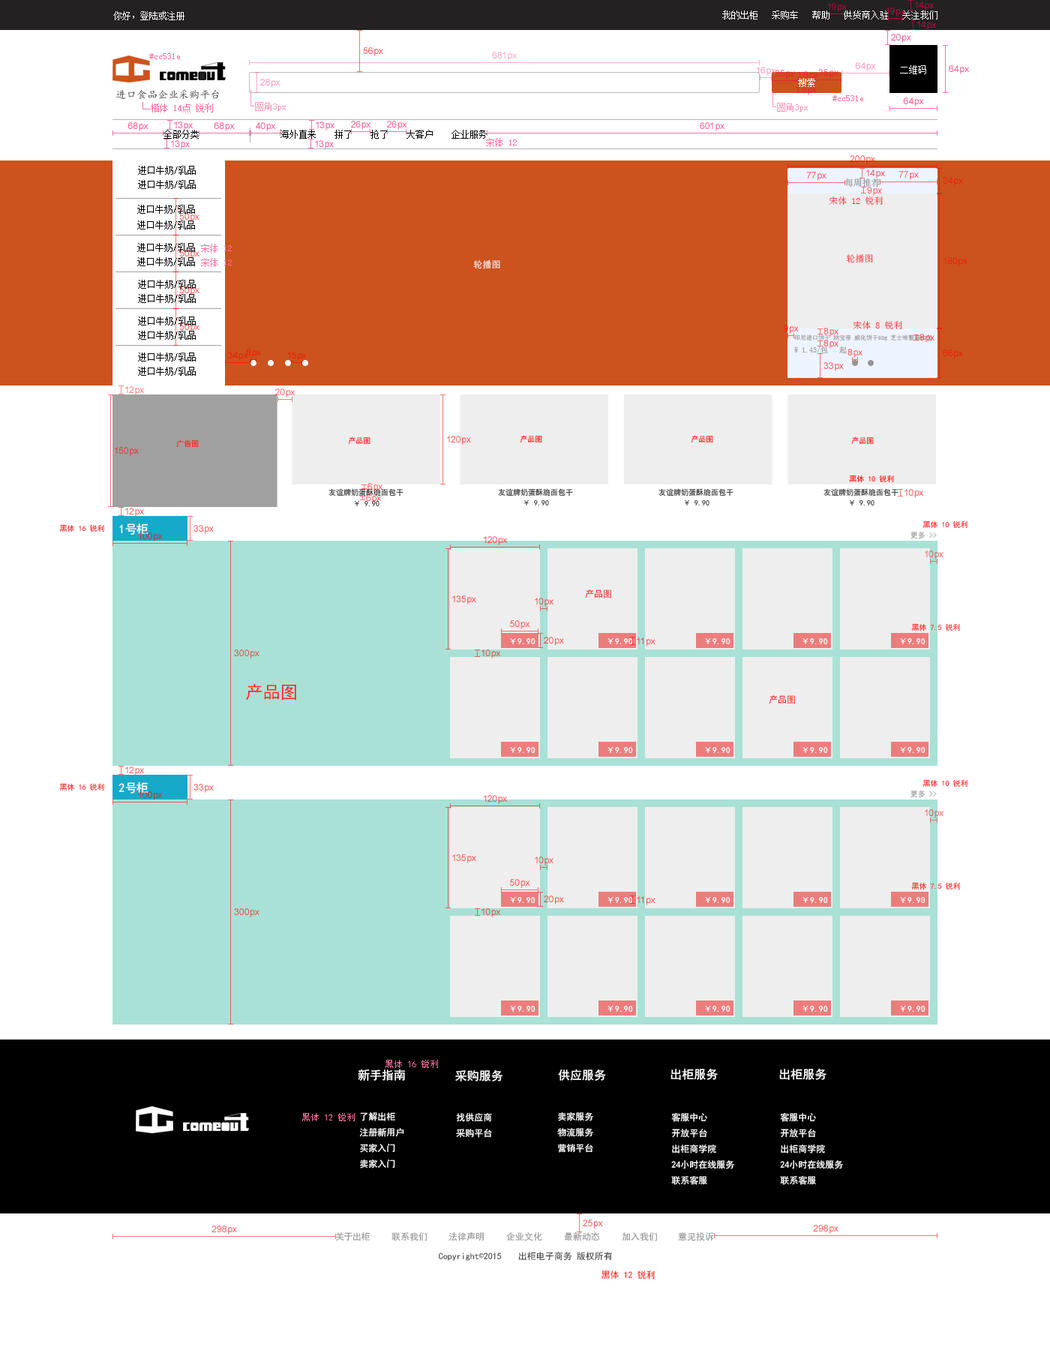
<style>
.page{position:relative;width:1050px;height:1350px;background:#ffffff}
.page>*{position:absolute;margin:0}
.t1{font:9px "SimSun";color:#ffffff}
.t2{font:9px "SimSun";color:#fc6f9a}
.t3{font:10.5px "¿¬Ìå";color:#464343}
.t4{font:9px "SimSun";color:#000000}
.t5{font:9px "SimSun";color:#959595}
.t6{font:9px "SimSun";color:#f13341}
.t7{font:9px "SimSun"}
.t8{font:9px "SimSun";color:#ffeeef}
.t9{font:6px "SimSun";color:#a0a0a0}
.t10{font:7.5px "SimSun";color:#a0a0a0}
.t11{font:7.5px "SimHei"}
.t12{font:7.5px "SimHei";color:#fe1d1d}
.t13{font:7.5px "SimHei";color:#363636}
.t14{font:7.5px "SimHei";color:#ff3535}
.t15{font:12px "SimHei";color:#fefefe}
.t16{font:7.5px "SimHei";color:#a0a0a0}
.t17{font:9px "SimHei";color:#ff2222}
.t18{font:8.2px "SimHei";color:#fefefe}
.t19{font:17.4px "SimHei";color:#ff2222}
.t20{font:9px "SimHei";color:#fc6f9a}
.t21{font:12px "SimHei";color:#ffffff}
.t22{font:9px "SimHei";color:#ffffff}
.t23{font:9px "SimHei";color:#959595}
.t24{font:9px "SimHei";color:#434343}
.t25{font:9px "SimSun";color:#434343}
</style>
<div class="page">
<p class="t1" style="left:113px;top:11px;width:71px;height:9px">你好，登陆或注册</p>
<p class="t1" style="left:722px;top:10px;width:216px;height:10px">我的出柜   采购车   帮助   供货商入驻   关注我们</p>
<p class="t2" style="left:149px;top:53px;width:31px;height:6px">#cc531e</p>
<p class="t1" style="left:900px;top:65px;width:26px;height:9px">二维码</p>
<p class="t1" style="left:798px;top:78px;width:17px;height:9px">搜索</p>
<p class="t3" style="left:116px;top:89px;width:103px;height:11px">进口食品企业采购平台</p>
<p class="t2" style="left:832px;top:95px;width:31px;height:6px">#cc531e</p>
<p class="t4" style="left:164px;top:130px;width:35px;height:9px">全部分类</p>
<p class="t4" style="left:280px;top:130px;width:207px;height:9px">海外直来    拼了    抢了    大客户    企业服务</p>
<p class="t2" style="left:486px;top:138px;width:31px;height:9px">宋体 12</p>
<p class="t4" style="left:138px;top:166px;width:58px;height:9px">进口牛奶/乳品</p>
<p class="t4" style="left:138px;top:180px;width:58px;height:9px">进口牛奶/乳品</p>
<p class="t5" style="left:844px;top:178px;width:36px;height:10px">每周推荐</p>
<p class="t6" style="left:829px;top:196px;width:54px;height:10px">宋体 12 锐利</p>
<p class="t4" style="left:137px;top:205px;width:58px;height:9px">进口牛奶/乳品</p>
<p class="t4" style="left:137px;top:220px;width:58px;height:10px">进口牛奶/乳品</p>
<p class="t4" style="left:137px;top:243px;width:58px;height:9px">进口牛奶/乳品</p>
<p class="t2" style="left:201px;top:244px;width:31px;height:9px">宋体 12</p>
<p class="t4" style="left:137px;top:257px;width:58px;height:9px">进口牛奶/乳品</p>
<p class="t7" style="left:846px;top:254px;width:27px;height:9px">轮播图</p>
<p class="t2" style="left:201px;top:258px;width:31px;height:9px">宋体 12</p>
<p class="t8" style="left:473px;top:260px;width:27px;height:9px">轮播图</p>
<p class="t4" style="left:138px;top:280px;width:58px;height:9px">进口牛奶/乳品</p>
<p class="t4" style="left:138px;top:294px;width:58px;height:9px">进口牛奶/乳品</p>
<p class="t4" style="left:138px;top:316px;width:58px;height:10px">进口牛奶/乳品</p>
<p class="t6" style="left:853px;top:321px;width:49px;height:9px">宋体 8 锐利</p>
<p class="t4" style="left:138px;top:331px;width:58px;height:9px">进口牛奶/乳品</p>
<p class="t9" style="left:794px;top:334px;width:138px;height:6px">印尼进口饼干 纳宝帝 威化饼干58g 芝士味整箱60包</p>
<p class="t4" style="left:138px;top:352px;width:58px;height:10px">进口牛奶/乳品</p>
<p class="t10" style="left:794px;top:346px;width:53px;height:8px">¥ 1.45/包   起</p>
<p class="t4" style="left:138px;top:367px;width:58px;height:9px">进口牛奶/乳品</p>
<p class="t11" style="left:348px;top:436px;width:22px;height:9px">产品图</p>
<p class="t11" style="left:520px;top:435px;width:22px;height:8px">产品图</p>
<p class="t11" style="left:691px;top:435px;width:22px;height:8px">产品图</p>
<p class="t11" style="left:851px;top:436px;width:23px;height:9px">产品图</p>
<p class="t12" style="left:176px;top:440px;width:23px;height:8px">广告图</p>
<p class="t12" style="left:849px;top:475px;width:45px;height:8px">黑体 10 锐利</p>
<p class="t13" style="left:328px;top:488px;width:76px;height:8px">友谊牌奶蛋酥脆面包干</p>
<p class="t13" style="left:498px;top:488px;width:75px;height:8px">友谊牌奶蛋酥脆面包干</p>
<p class="t13" style="left:658px;top:488px;width:76px;height:8px">友谊牌奶蛋酥脆面包干</p>
<p class="t13" style="left:824px;top:488px;width:74px;height:8px">友谊牌奶蛋酥脆面包干</p>
<p class="t11" style="left:355px;top:500px;width:25px;height:7px">￥ 9.90</p>
<p class="t11" style="left:524px;top:500px;width:25px;height:6px">￥ 9.90</p>
<p class="t11" style="left:685px;top:500px;width:25px;height:6px">￥ 9.90</p>
<p class="t11" style="left:850px;top:500px;width:24px;height:6px">￥ 9.90</p>
<p class="t14" style="left:922px;top:520px;width:46px;height:9px">黑体 10 锐利</p>
<p class="t14" style="left:59px;top:524px;width:45px;height:8px">黑体 16 锐利</p>
<p class="t15" style="left:119px;top:523px;width:29px;height:12px">1号柜</p>
<p class="t16" style="left:910px;top:532px;width:27px;height:7px">更多 &gt;&gt;</p>
<p class="t17" style="left:585px;top:590px;width:26px;height:8px">产品图</p>
<p class="t14" style="left:911px;top:623px;width:49px;height:9px">黑体 7.5 锐利</p>
<p class="t18" style="left:510px;top:638px;width:26px;height:6px">￥9.90</p>
<p class="t18" style="left:608px;top:638px;width:25px;height:6px">￥9.90</p>
<p class="t18" style="left:705px;top:638px;width:25px;height:6px">￥9.90</p>
<p class="t18" style="left:802px;top:638px;width:26px;height:6px">￥9.90</p>
<p class="t18" style="left:900px;top:638px;width:26px;height:6px">￥9.90</p>
<p class="t19" style="left:246px;top:683px;width:50px;height:17px">产品图</p>
<p class="t17" style="left:769px;top:695px;width:26px;height:9px">产品图</p>
<p class="t18" style="left:510px;top:747px;width:26px;height:6px">￥9.90</p>
<p class="t18" style="left:608px;top:747px;width:25px;height:6px">￥9.90</p>
<p class="t18" style="left:705px;top:747px;width:25px;height:6px">￥9.90</p>
<p class="t18" style="left:802px;top:747px;width:26px;height:6px">￥9.90</p>
<p class="t18" style="left:900px;top:747px;width:26px;height:6px">￥9.90</p>
<p class="t14" style="left:59px;top:783px;width:45px;height:8px">黑体 16 锐利</p>
<p class="t15" style="left:118px;top:782px;width:30px;height:12px">2号柜</p>
<p class="t14" style="left:922px;top:779px;width:46px;height:9px">黑体 10 锐利</p>
<p class="t16" style="left:910px;top:790px;width:27px;height:8px">更多 &gt;&gt;</p>
<p class="t14" style="left:911px;top:882px;width:49px;height:8px">黑体 7.5 锐利</p>
<p class="t18" style="left:510px;top:897px;width:26px;height:6px">￥9.90</p>
<p class="t18" style="left:608px;top:897px;width:25px;height:6px">￥9.90</p>
<p class="t18" style="left:705px;top:897px;width:25px;height:6px">￥9.90</p>
<p class="t18" style="left:802px;top:897px;width:26px;height:6px">￥9.90</p>
<p class="t18" style="left:900px;top:897px;width:26px;height:6px">￥9.90</p>
<p class="t18" style="left:510px;top:1006px;width:26px;height:6px">￥9.90</p>
<p class="t18" style="left:608px;top:1006px;width:25px;height:6px">￥9.90</p>
<p class="t18" style="left:705px;top:1006px;width:25px;height:6px">￥9.90</p>
<p class="t18" style="left:802px;top:1006px;width:26px;height:6px">￥9.90</p>
<p class="t18" style="left:900px;top:1006px;width:26px;height:6px">￥9.90</p>
<p class="t20" style="left:386px;top:1060px;width:52px;height:8px">黑体 16 锐利</p>
<p class="t21" style="left:358px;top:1069px;width:48px;height:12px">新手指南</p>
<p class="t21" style="left:455px;top:1070px;width:47px;height:12px">采购服务</p>
<p class="t21" style="left:558px;top:1069px;width:48px;height:12px">供应服务</p>
<p class="t21" style="left:670px;top:1068px;width:48px;height:12px">出柜服务</p>
<p class="t21" style="left:779px;top:1068px;width:47px;height:12px">出柜服务</p>
<p class="t20" style="left:302px;top:1113px;width:53px;height:8px">黑体 12 锐利</p>
<p class="t22" style="left:359px;top:1112px;width:45px;height:56px">了解出柜<br>注册新用户<br>买家入门<br>卖家入门</p>
<p class="t22" style="left:456px;top:1113px;width:36px;height:25px">找供应商<br>采购平台</p>
<p class="t22" style="left:557px;top:1112px;width:36px;height:41px">卖家服务<br>物流服务<br>营销平台</p>
<p class="t22" style="left:671px;top:1113px;width:63px;height:72px">客服中心<br>开放平台<br>出柜商学院<br>24小时在线服务<br>联系客服</p>
<p class="t22" style="left:780px;top:1113px;width:63px;height:72px">客服中心<br>开放平台<br>出柜商学院<br>24小时在线服务<br>联系客服</p>
<p class="t23" style="left:335px;top:1232px;width:35px;height:9px">关于出柜</p>
<p class="t23" style="left:392px;top:1232px;width:35px;height:9px">联系我们</p>
<p class="t23" style="left:448px;top:1232px;width:36px;height:9px">法律声明</p>
<p class="t23" style="left:506px;top:1232px;width:36px;height:9px">企业文化</p>
<p class="t23" style="left:564px;top:1232px;width:36px;height:9px">最新动态</p>
<p class="t23" style="left:622px;top:1232px;width:35px;height:9px">加入我们</p>
<p class="t23" style="left:678px;top:1232px;width:36px;height:9px">意见投诉</p>
<p class="t24" style="left:439px;top:1252px;width:63px;height:9px">Copyright<span class="t25">©</span>2015</p>
<p class="t24" style="left:518px;top:1252px;width:54px;height:9px">出柜电子商务</p>
<p class="t24" style="left:577px;top:1252px;width:35px;height:9px">版权所有</p>
<p class="t17" style="left:601px;top:1270px;width:54px;height:10px">黑体 12 锐利</p>
</div>
